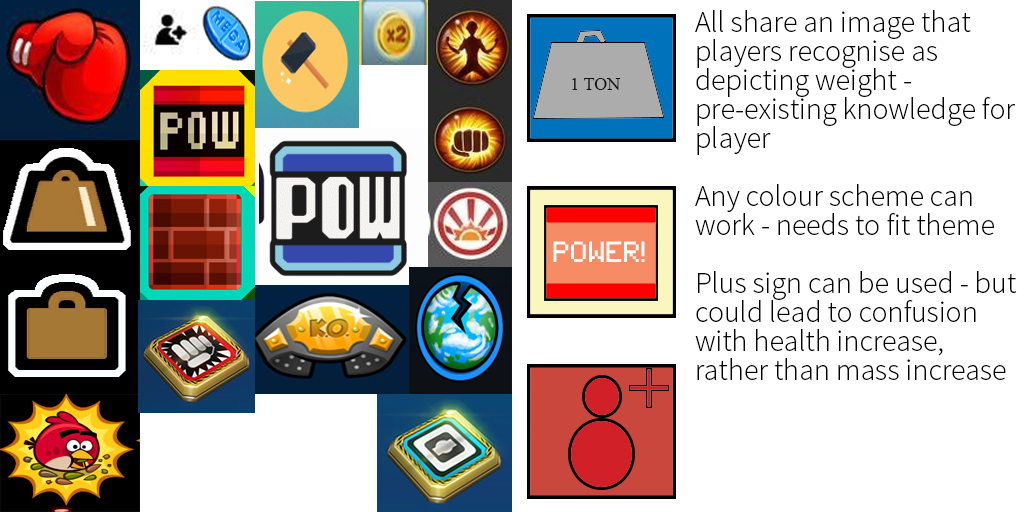
<style>
.page{position:relative;width:1024px;height:512px;background:#ffffff}
.page>*{position:absolute;margin:0}
.t1{font:30px/29px "SourceSansPro-Light";color:#000000}
</style>
<div class="page">
<p class="t1" style="left:695px;top:10px;width:322px;height:370px">All share an image that<br>players recognise as <br>depicting weight - <br>pre-existing knowledge for<br>player<br><br>Any colour scheme can<br>work - needs to fit theme<br><br>Plus sign can be used - but<br>could lead to confusion <br>with health increase, <br>rather than mass increase</p>
</div>
